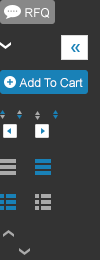
<style>
.page{position:relative;width:100px;height:260px;background:#333333}
.page>*{position:absolute;margin:0}
.t1{font:12px "ArialMT";color:#ffffff}
</style>
<div class="page">
<p class="t1" style="left:25px;top:8px;width:25px;height:10px">RFQ</p>
<p class="t1" style="left:19px;top:78px;width:64px;height:10px">Add To Cart</p>
</div>
